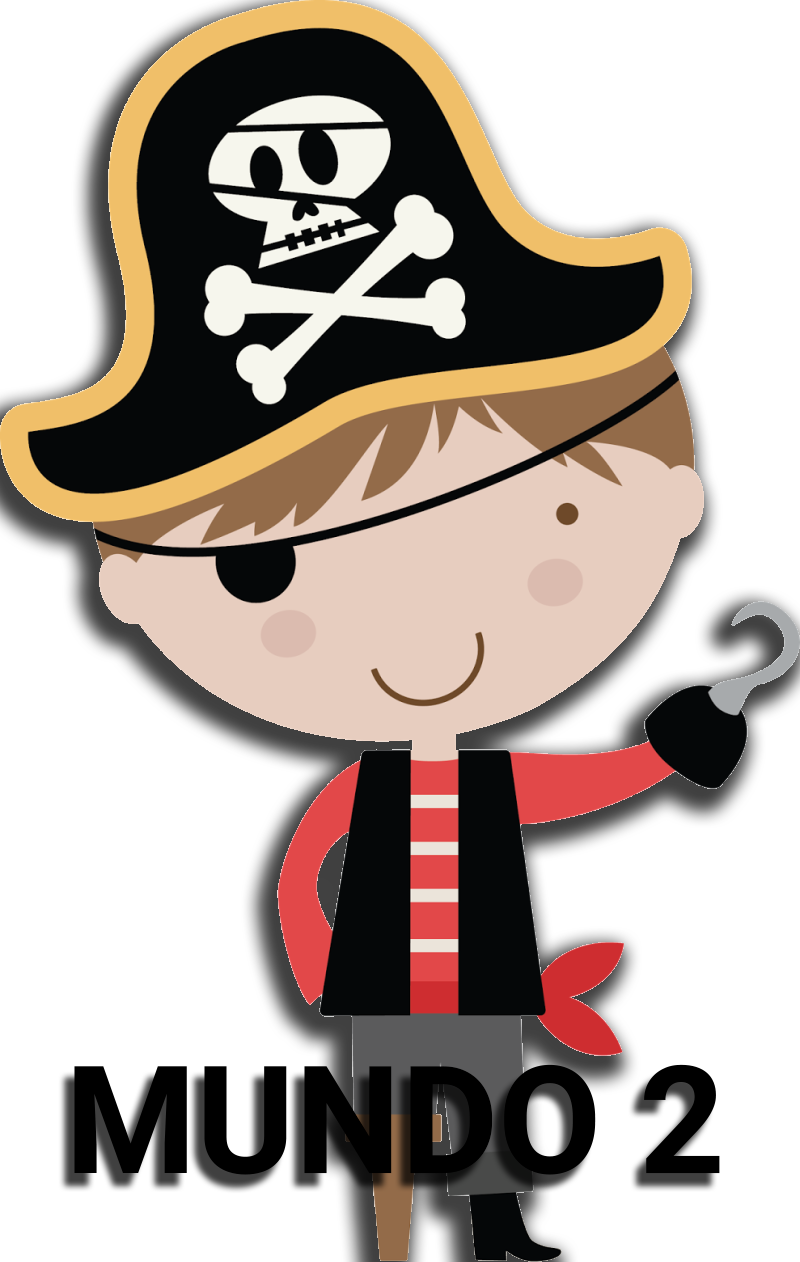
<style>
.page{position:relative;width:800px;height:1262px;background:#ffffff}
.page>*{position:absolute;margin:0}
.t1{font:150px "Roboto-Bold";color:#000000}
</style>
<div class="page">
<p class="t1" style="left:74px;top:1064px;width:646px;height:111px">MUNDO 2</p>
</div>
